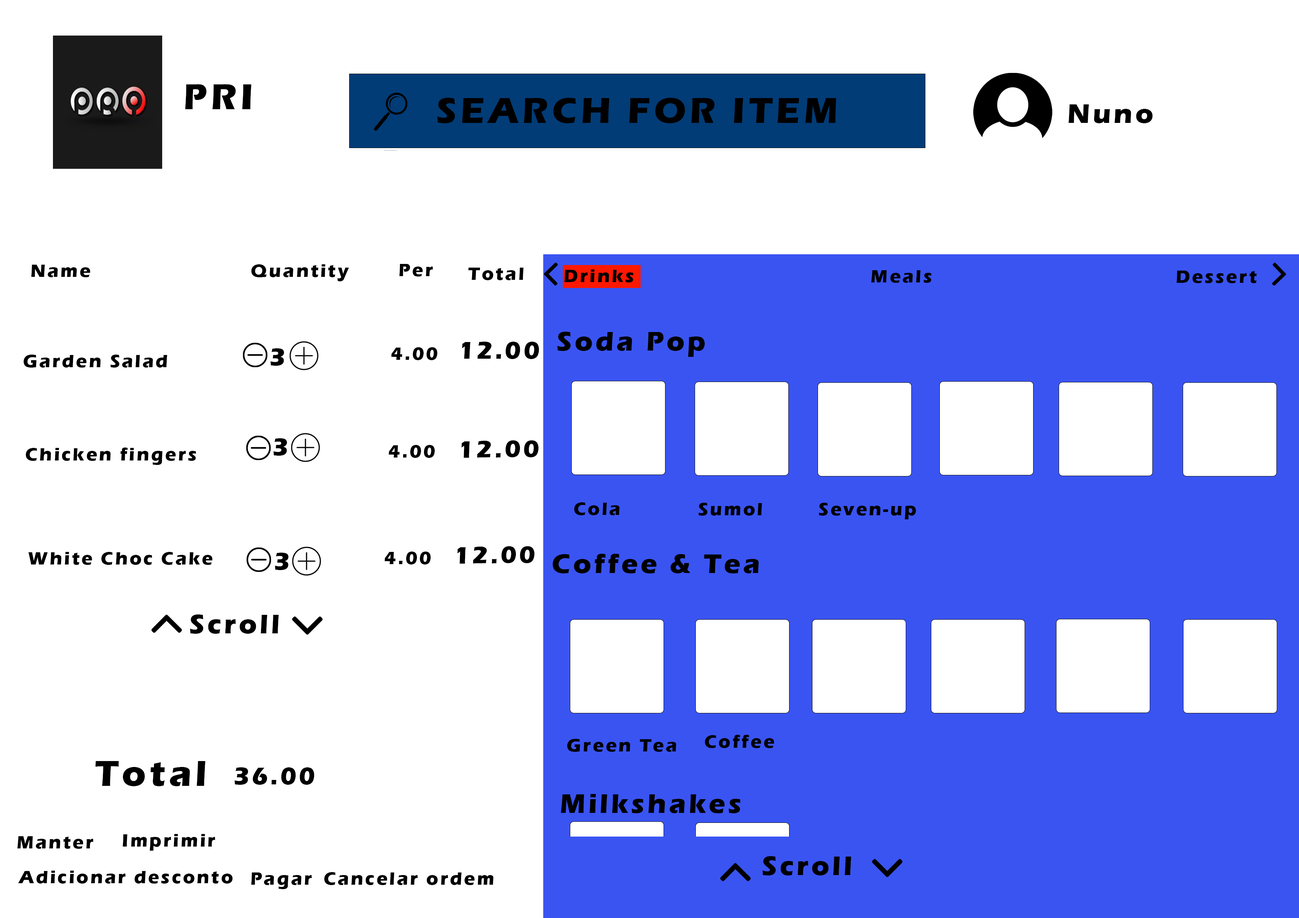
<style>
.page{position:relative;width:1299px;height:918px;background:#ffffff}
.page>*{position:absolute;margin:0}
.t1{font:37px "ErasITC-Bold";letter-spacing:0.1em;color:#000000}
.t2{font:27.8px "ErasITC-Bold";letter-spacing:0.1em;color:#000000}
.t3{font:18.5px "ErasITC-Bold";letter-spacing:0.1em;color:#000000}
.t4{font:24.7px "ErasITC-Bold";letter-spacing:0.1em;color:#000000}
</style>
<div class="page">
<p class="t1" style="left:185px;top:84px;width:66px;height:25px">PRI</p>
<p class="t1" style="left:437px;top:98px;width:399px;height:25px">SEARCH FOR ITEM</p>
<p class="t2" style="left:1068px;top:104px;width:84px;height:19px">Nuno</p>
<p class="t3" style="left:31px;top:265px;width:59px;height:12px">Name</p>
<p class="t3" style="left:251px;top:264px;width:98px;height:17px">Quantity</p>
<p class="t3" style="left:399px;top:264px;width:34px;height:13px">Per</p>
<p class="t3" style="left:468px;top:268px;width:55px;height:12px">Total</p>
<p class="t3" style="left:564px;top:270px;width:69px;height:12px">Drinks</p>
<p class="t3" style="left:871px;top:270px;width:60px;height:13px">Meals</p>
<p class="t3" style="left:1176px;top:271px;width:81px;height:12px">Dessert</p>
<p class="t4" style="left:462px;top:342px;width:77px;height:17px">12.00</p>
<p class="t2" style="left:557px;top:332px;width:148px;height:25px">Soda Pop</p>
<p class="t4" style="left:270px;top:348px;width:14px;height:18px">3</p>
<p class="t3" style="left:391px;top:347px;width:46px;height:13px">4.00</p>
<p class="t3" style="left:23px;top:355px;width:144px;height:13px">Garden Salad</p>
<p class="t3" style="left:26px;top:448px;width:170px;height:17px">Chicken fingers</p>
<p class="t4" style="left:273px;top:438px;width:14px;height:18px">3</p>
<p class="t3" style="left:388px;top:445px;width:47px;height:13px">4.00</p>
<p class="t4" style="left:461px;top:440px;width:78px;height:18px;rotate:-1deg">12.00</p>
<p class="t3" style="left:574px;top:502px;width:45px;height:13px">Cola</p>
<p class="t3" style="left:698px;top:503px;width:64px;height:13px">Sumol</p>
<p class="t3" style="left:819px;top:503px;width:97px;height:16px">Seven-up</p>
<p class="t3" style="left:28px;top:552px;width:185px;height:13px">White Choc Cake</p>
<p class="t4" style="left:275px;top:553px;width:13px;height:17px">3</p>
<p class="t3" style="left:384px;top:552px;width:47px;height:13px">4.00</p>
<p class="t4" style="left:457px;top:546px;width:78px;height:18px;rotate:-1deg">12.00</p>
<p class="t2" style="left:552px;top:554px;width:207px;height:19px">Coffee &amp; Tea</p>
<p class="t2" style="left:190px;top:615px;width:89px;height:19px">Scroll</p>
<p class="t3" style="left:705px;top:735px;width:69px;height:13px">Coffee</p>
<p class="t3" style="left:567px;top:739px;width:109px;height:13px">Green Tea</p>
<p class="t1" style="left:95px;top:761px;width:110px;height:25px">Total</p>
<p class="t4" style="left:234px;top:767px;width:80px;height:18px">36.00</p>
<p class="t2" style="left:561px;top:794px;width:179px;height:19px">Milkshakes</p>
<p class="t3" style="left:17px;top:836px;width:76px;height:13px">Manter</p>
<p class="t3" style="left:123px;top:834px;width:92px;height:17px">Imprimir</p>
<p class="t2" style="left:762px;top:856px;width:89px;height:20px">Scroll</p>
<p class="t3" style="left:18px;top:871px;width:214px;height:13px">Adicionar desconto</p>
<p class="t3" style="left:251px;top:873px;width:61px;height:16px">Pagar</p>
<p class="t3" style="left:324px;top:872px;width:170px;height:13px">Cancelar ordem</p>
</div>
